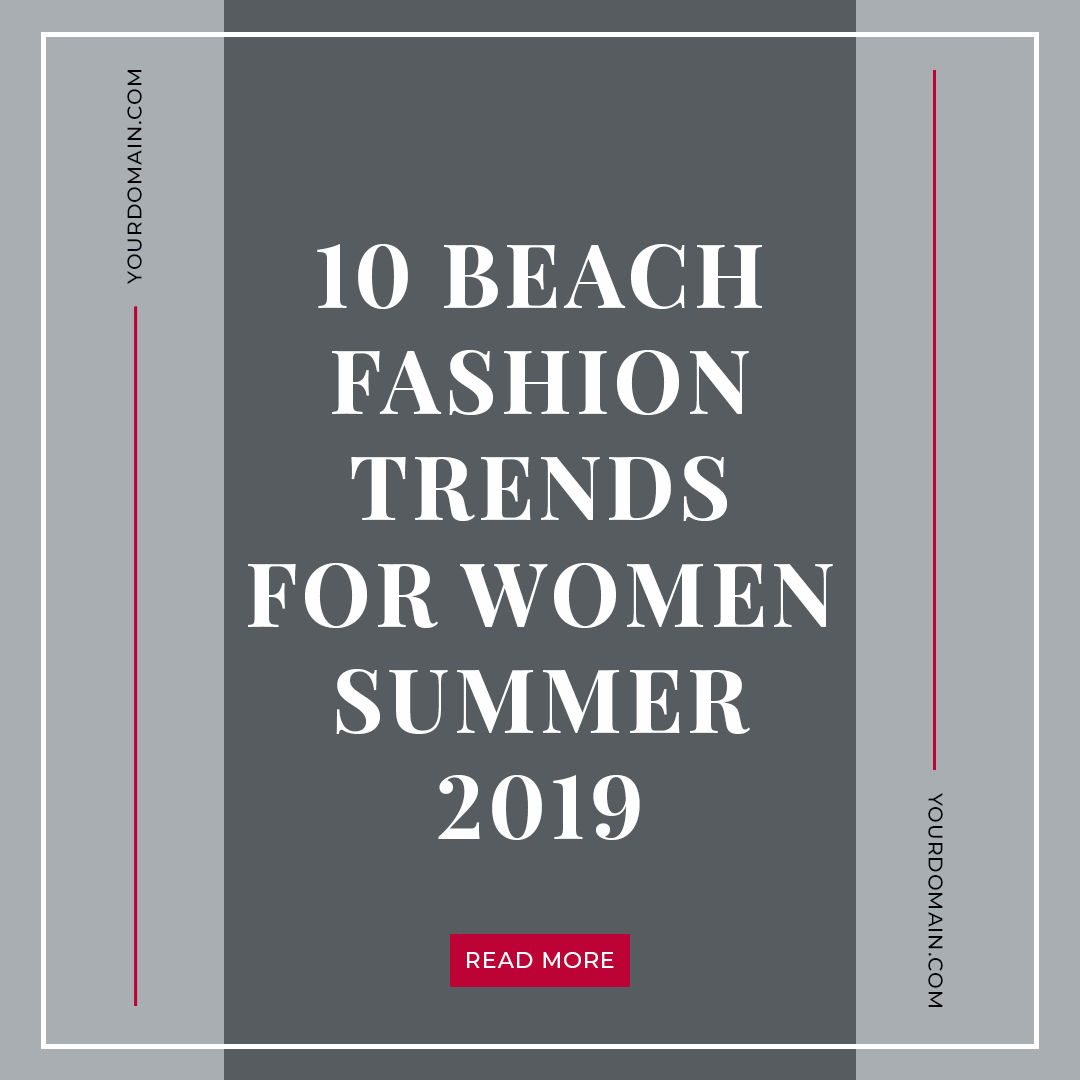
<style>
.page{position:relative;width:1080px;height:1080px;background:#565c60}
.page>*{position:absolute;margin:0}
.t1{font:20px "Montserrat-Medium";letter-spacing:0.05em;color:#000000;text-transform:uppercase}
.t2{font:88.4px "PlayfairDisplay-Bold";letter-spacing:0.05em;color:#fefefe;text-transform:uppercase}
.t3{font:22px "Montserrat-Medium";letter-spacing:0.05em;color:#ffffff;text-transform:uppercase}
</style>
<div class="page">
<p class="t1" style="left:127px;top:70px;width:15px;height:214px;rotate:-90deg">Yourdomain.com</p>
<p class="t2" style="left:248px;top:244px;width:585px;height:596px;text-align:center">10 Beach<br>Fashion<br>trends<br>for Women<br>Summer<br>2019</p>
<p class="t1" style="left:928px;top:793px;width:15px;height:214px;rotate:90deg">Yourdomain.com</p>
<p class="t3" style="left:467px;top:952px;width:147px;height:16px">Read More</p>
</div>
